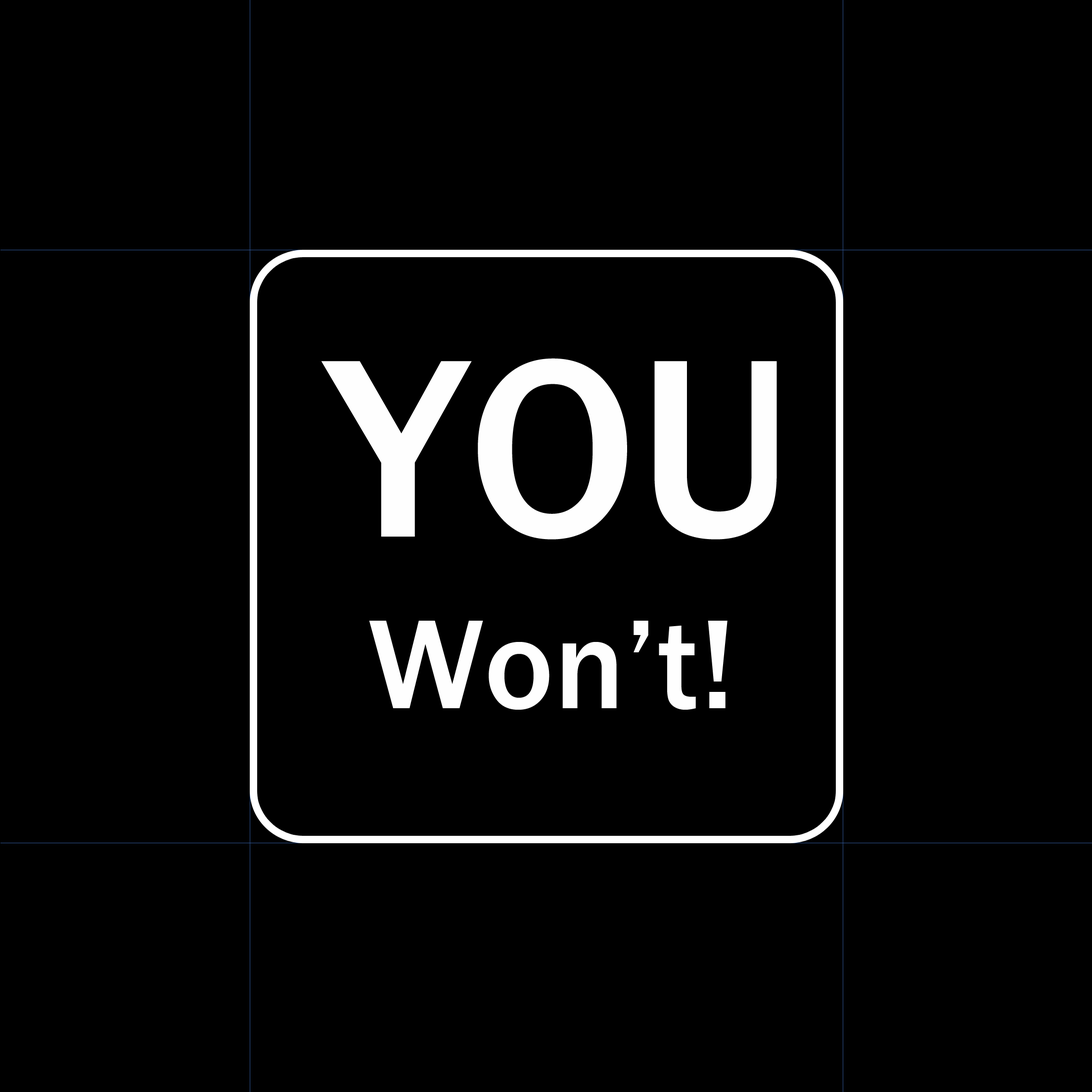
<style>
.page{position:relative;width:1092px;height:1092px;background:#000000}
.page>*{position:absolute;margin:0}
.t1{font:263.1px "FranklinGothic-Medium";color:#fefefe}
.t2{font:131.6px "FranklinGothic-Medium";color:#fefefe}
</style>
<div class="page">
<p class="t1" style="left:321px;top:358px;width:456px;height:182px">YOU</p>
<p class="t2" style="left:369px;top:621px;width:358px;height:89px">Won’t!</p>
</div>
